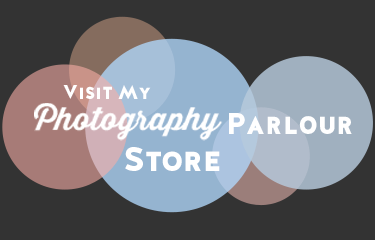
<style>
.page{position:relative;width:375px;height:240px;background:#333333}
.page>*{position:absolute;margin:0}
.t1{font:20px "HalisGR-SBlack";color:#ffffff}
.t2{font:31.7px "ThirstyScriptBold";color:#fffefe}
.t3{font:29.9px "HalisGR-SBlack";color:#ffffff}
.t4{font:33.2px "HalisGR-SBlack";color:#ffffff}
</style>
<div class="page">
<p class="t1" style="left:63px;top:85px;width:88px;height:14px">Visit My</p>
<p class="t2" style="left:34px;top:103px;width:189px;height:38px">Photography</p>
<p class="t3" style="left:229px;top:113px;width:123px;height:21px">Parlour</p>
<p class="t4" style="left:125px;top:147px;width:95px;height:24px">Store</p>
</div>
